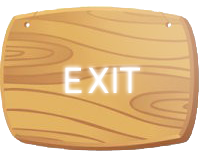
<style>
.page{position:relative;width:202px;height:155px}
.page>*{position:absolute;margin:0}
.t1{font:36px "JosefinSans-Bold";color:#fefefe}
</style>
<div class="page">
<p class="t1" style="left:65px;top:67px;width:75px;height:26px">EXIT</p>
</div>
